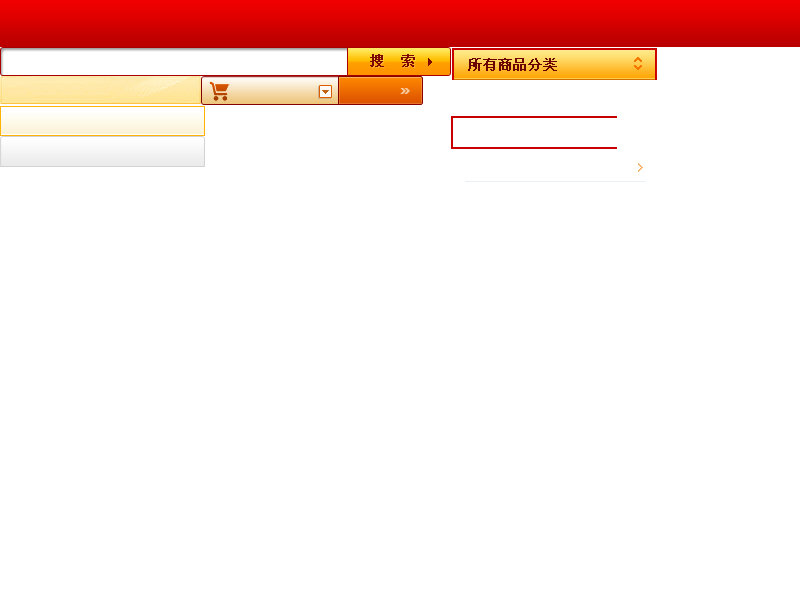
<style>
.page{position:relative;width:800px;height:600px;background:#ffffff}
.page>*{position:absolute;margin:0}
.t1{font:14px "NSimSun";color:#7e0700;font-weight:bold}
.t2{font:14px "NSimSun";font-weight:bold}
.t3{font:14px "NSimSun";color:#6b0301;font-weight:bold}
</style>
<div class="page">
<p class="t1" style="left:370px;top:54px;width:45px;height:13px">搜  索</p>
<p class="t2" style="left:371px;top:55px;width:45px;height:13px">搜  索</p>
<p class="t3" style="left:468px;top:58px;width:89px;height:13px">所有商品分类</p>
</div>
